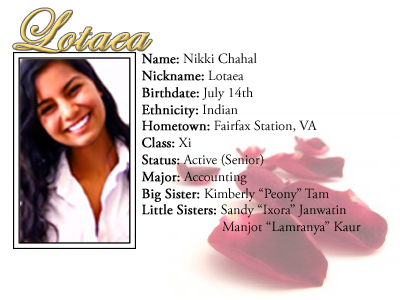
<style>
.page{position:relative;width:400px;height:300px;background:#ffffff}
.page>*{position:absolute;margin:0}
.t1{font:60px "EdwardianScriptITC";font-weight:bold}
.t2{font:14px "AGaramondPro-Regular";color:#000000}
.t3{font:14px "AGaramondPro-Regular";color:#000000;font-weight:bold}
</style>
<div class="page">
<p class="t1" style="left:13px;top:8px;width:139px;height:45px">Lotaea</p>
<p class="t2" style="left:141px;top:53px;width:220px;height:182px"><span class="t3">Name:</span> Nikki Chahal<br><span class="t3">Nickname:</span> Lotaea<br><span class="t3">Birthdate:</span> July 14th<br><span class="t3">Ethnicity:</span> Indian<br><span class="t3">Hometown:</span> Fairfax Station, VA<br><span class="t3">Class:</span> Xi<br><span class="t3">Status:</span> Active (Senior)<br><span class="t3">Major:</span> Accounting<br><span class="t3">Big Sister: </span>Kimberly “Peony” Tam<br><span class="t3">Little Sisters: </span>Sandy “Ixora” Janwatin<br>                       Manjot “Lamranya” Kaur</p>
</div>
